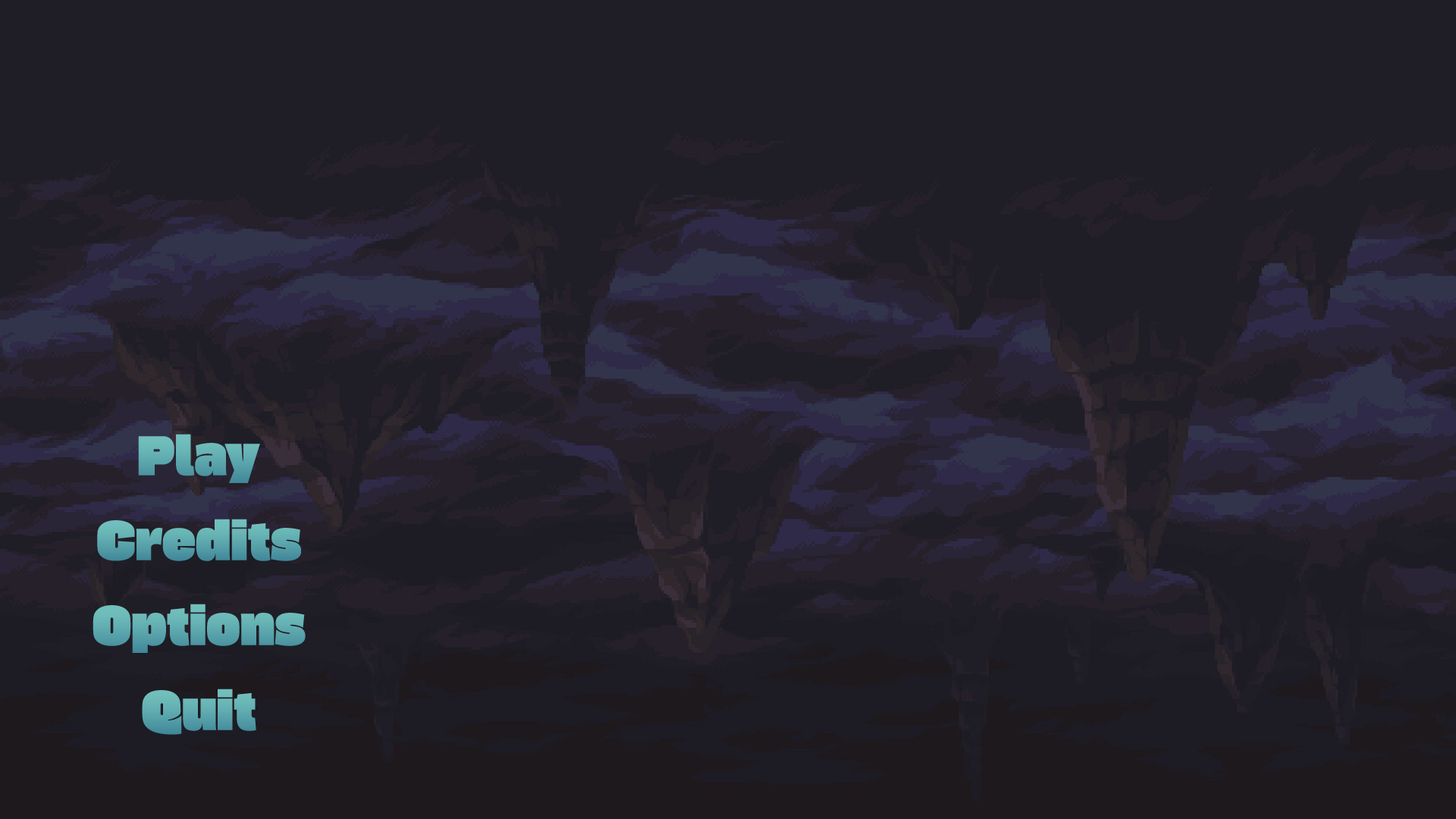
<style>
.page{position:relative;width:1456px;height:819px;background:#1f1e26}
.page>*{position:absolute;margin:0}
.t1{font:50.6px "GasoekOne-Regular";color:#62adb1}
.t2{font:50.6px "GasoekOne-Regular";color:#5ca7ad}
.t3{font:50.6px "GasoekOne-Regular";color:#60abb0}
.t4{font:50.6px "GasoekOne-Regular";color:#5eaaaf}
</style>
<div class="page">
<p class="t1" style="left:138px;top:434px;width:122px;height:49px">Play</p>
<p class="t2" style="left:97px;top:519px;width:204px;height:42px">Credits</p>
<p class="t3" style="left:93px;top:604px;width:213px;height:49px">Options</p>
<p class="t4" style="left:142px;top:689px;width:114px;height:46px">Quit</p>
</div>
